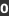
<style>
.page{position:relative;width:9px;height:16px;background:#333333}
.page>*{position:absolute;margin:0}
.t1{font:12.5px "RoundedMplus1c-ExtraBold";color:#ffffff}
</style>
<div class="page">
<p class="t1" style="left:0px;top:3px;width:9px;height:11px">0</p>
</div>
